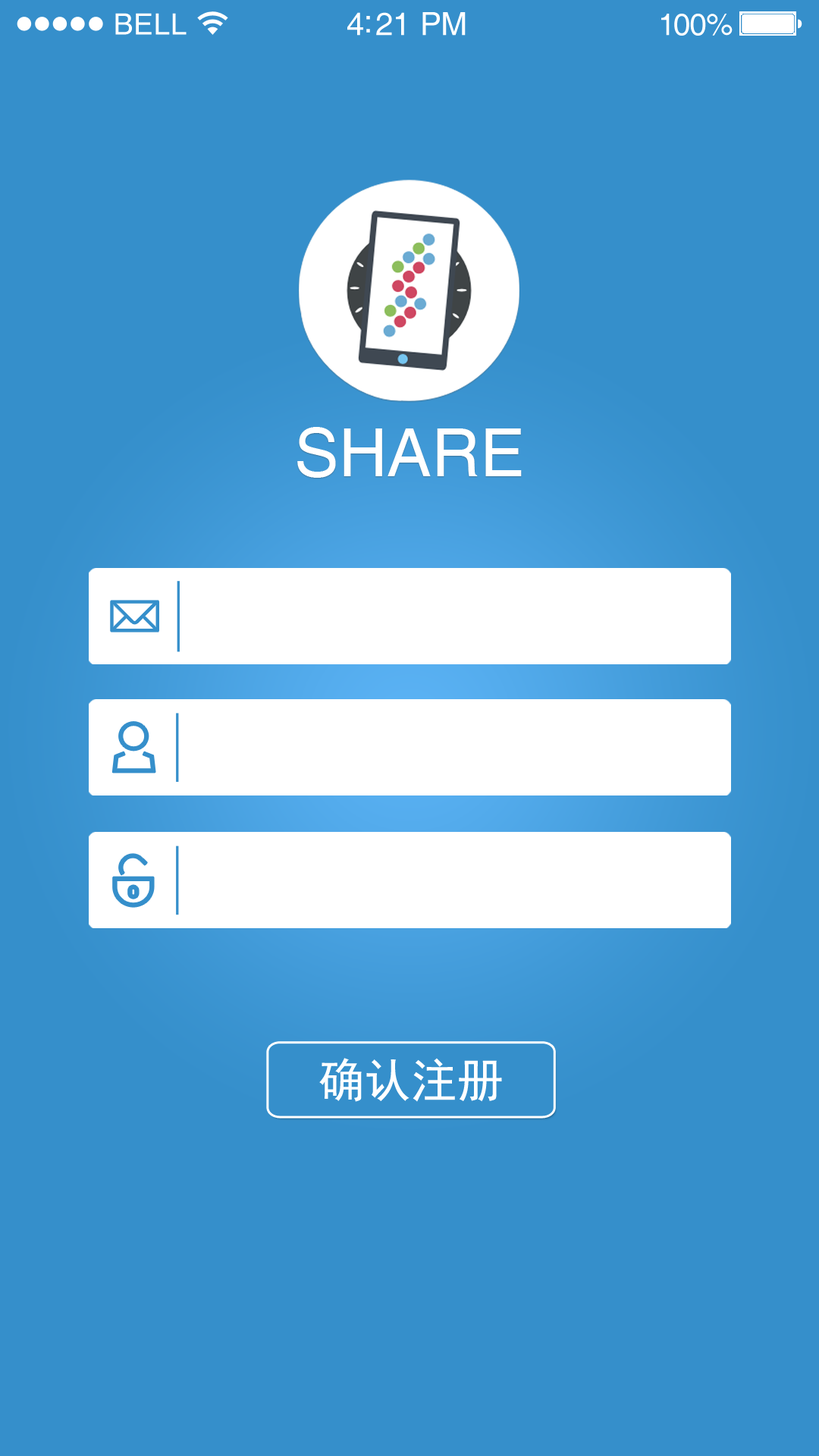
<style>
.page{position:relative;width:819px;height:1456px;background:#358fcb}
.page>*{position:absolute;margin:0}
.t1{font:29.3px "Helvetica";letter-spacing:0.02em;color:#ffffff}
.t2{font:31.8px "Helvetica";letter-spacing:-0.02em;color:#ffffff}
.t3{font:30.6px "Helvetica";letter-spacing:-0.02em;color:#ffffff}
.t4{font:66.7px "Helvetica";color:#ffffff}
.t5{font:46.3px "SimHei";color:#ffffff}
</style>
<div class="page">
<p class="t1" style="left:115px;top:13px;width:72px;height:22px">BELL</p>
<p class="t2" style="left:347px;top:12px;width:119px;height:24px">4:21 PM</p>
<p class="t3" style="left:661px;top:14px;width:72px;height:22px">100%</p>
<p class="t4" style="left:297px;top:427px;width:225px;height:51px">SHARE</p>
<p class="t5" style="left:319px;top:1058px;width:183px;height:44px">确认注册</p>
</div>
